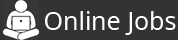
<style>
.page{position:relative;width:178px;height:40px;background:#333333}
.page>*{position:absolute;margin:0}
.t1{font:25px "NotoSans-Regular";color:#ffffff}
</style>
<div class="page">
<p class="t1" style="left:45px;top:11px;width:131px;height:24px">Online Jobs</p>
</div>
